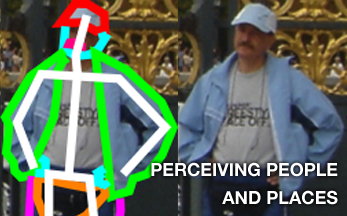
<style>
.page{position:relative;width:347px;height:216px}
.page>*{position:absolute;margin:0}
.t1{font:18px/28px "HelveticaNeue-Bold";color:#ffffff}
</style>
<div class="page">
<p class="t1" style="left:151px;top:162px;width:187px;height:43px;text-align:right">PERCEIVING PEOPLE<br>AND PLACES</p>
</div>
